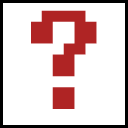
<style>
.page{position:relative;width:128px;height:128px;background:#ffffff}
.page>*{position:absolute;margin:0}
.t1{font:139.7px "Fixedsys";color:#af2424}
</style>
<div class="page">
<p class="t1" style="left:31px;top:10px;width:66px;height:99px">?</p>
</div>
